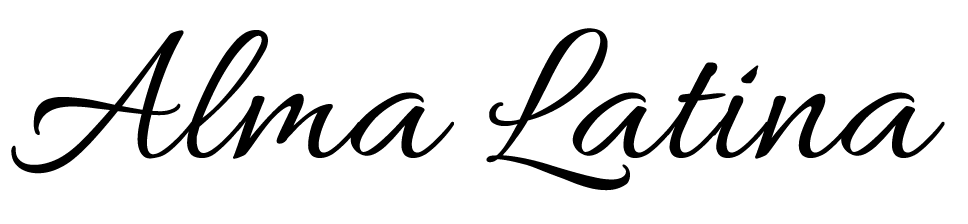
<style>
.page{position:relative;width:968px;height:224px;background:#ffffff}
.page>*{position:absolute;margin:0}
.t1{font:208.5px "Allura-Regular";letter-spacing:0.005em;color:#000000;scale:0.97 1}
</style>
<div class="page">
<p class="t1" style="left:11px;top:28px;width:934px;height:163px">Alma Latina</p>
</div>
